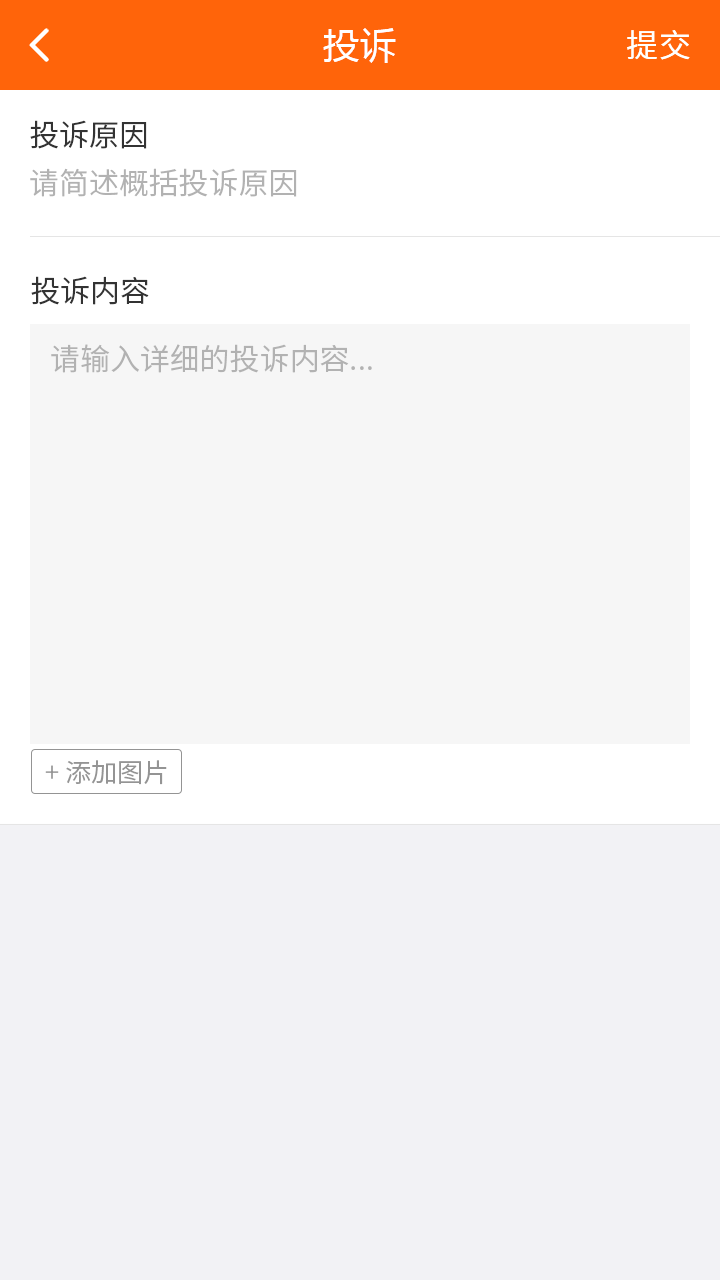
<style>
.page{position:relative;width:720px;height:1280px;background:#f2f2f5}
.page>*{position:absolute;margin:0}
.t1{font:36px "MicrosoftYaHei";letter-spacing:0.03em;color:#ffffff}
.t2{font:32px "NotoSansCJKsc-Regular";letter-spacing:0.03em;color:#ffffff;font-variant:small-caps}
.t3{font:30px "NotoSansCJKsc-DemiLight";color:#333333}
.t4{font:30px "NotoSansCJKsc-DemiLight";color:#b2b2b2}
.t5{font:26px "NotoSansCJKsc-DemiLight";color:#949494}
</style>
<div class="page">
<p class="t1" style="left:323px;top:28px;width:73px;height:35px">投诉</p>
<p class="t2" style="left:627px;top:30px;width:63px;height:30px">提交</p>
<p class="t3" style="left:30px;top:120px;width:117px;height:29px">投诉原因</p>
<p class="t4" style="left:30px;top:168px;width:267px;height:29px">请简述概括投诉原因</p>
<p class="t3" style="left:31px;top:276px;width:118px;height:29px">投诉内容</p>
<p class="t4" style="left:51px;top:344px;width:321px;height:29px">请输入详细的投诉内容...</p>
<p class="t5" style="left:45px;top:760px;width:122px;height:25px">+ 添加图片</p>
</div>
